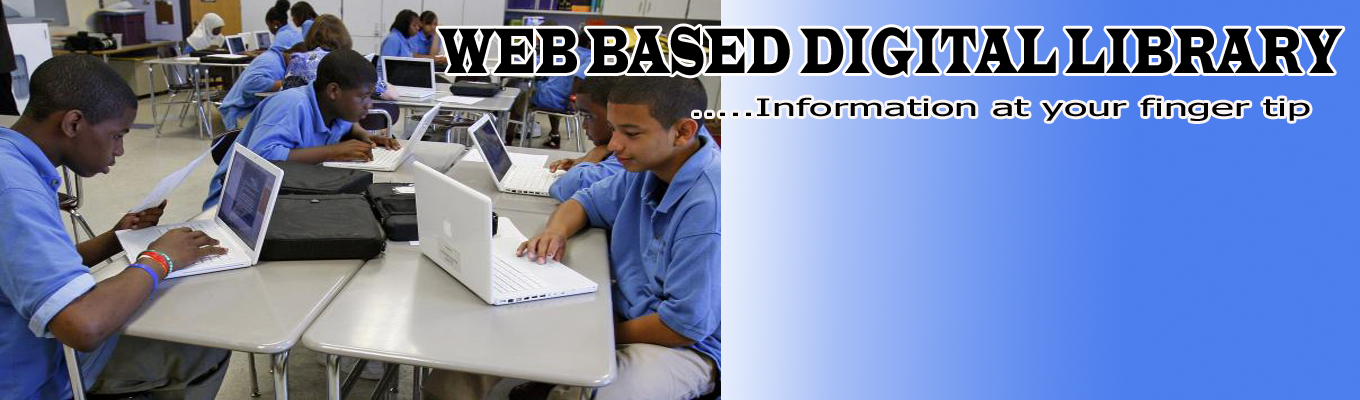
<style>
.page{position:relative;width:1360px;height:400px}
.page>*{position:absolute;margin:0}
.t1{font:66.2px "LatinWide";color:#000000;scale:0.45 1}
.t2{font:24px "Tahoma";color:#000000;scale:1.79 1}
</style>
<div class="page">
<p class="t1" style="left:438px;top:26px;width:905px;height:50px">WEB BASED DIGITAL LIBRARY</p>
<p class="t2" style="left:694px;top:97px;width:616px;height:24px">.....Information at your finger tip</p>
</div>
